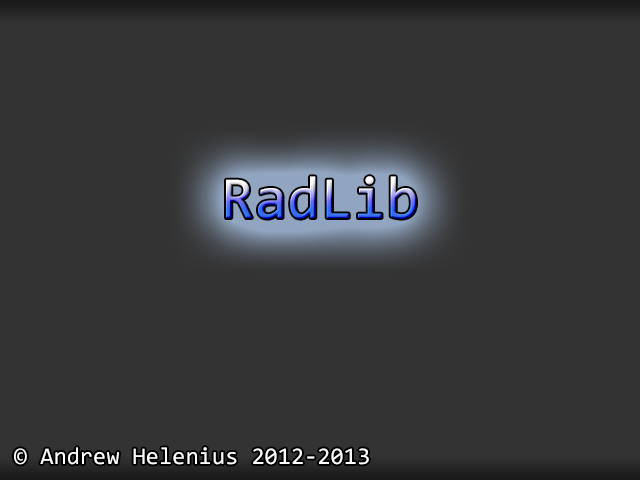
<style>
.page{position:relative;width:640px;height:480px;background:#333333}
.page>*{position:absolute;margin:0}
.t1{font:60px "Consolas"}
.t2{font:24px "Consolas";color:#ffffff}
</style>
<div class="page">
<p class="t1" style="left:226px;top:176px;width:190px;height:43px">RadLib</p>
<p class="t2" style="left:14px;top:447px;width:355px;height:18px">© Andrew Helenius 2012-2013</p>
</div>
